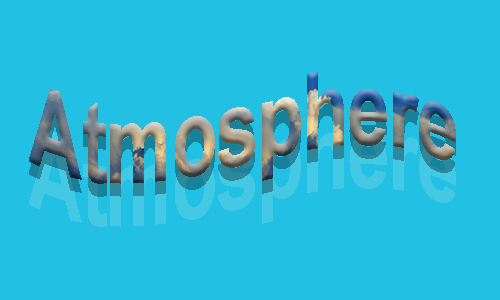
<style>
.page{position:relative;width:500px;height:300px;background:#22c0e2}
.page>*{position:absolute;margin:0}
.t1{font:107px "Arial-BoldMT";scale:0.69 1}
</style>
<div class="page">
<p class="t1" style="left:29px;top:72px;width:427px;height:112px">Atmosphere</p>
</div>
